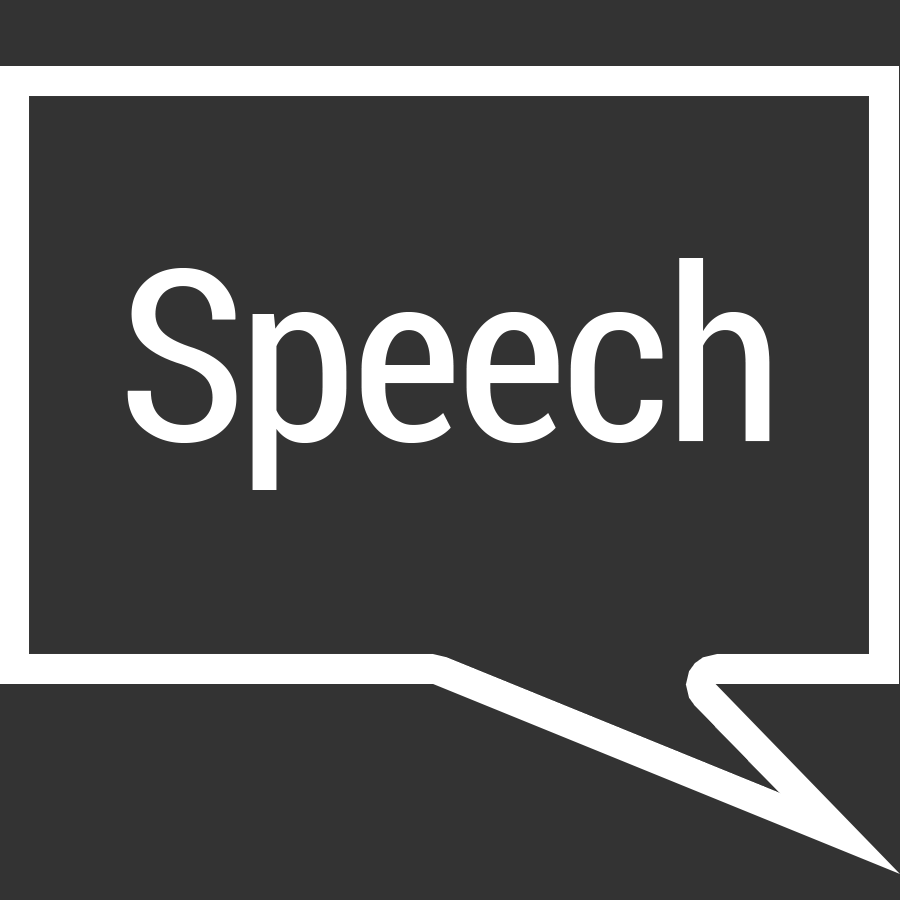
<style>
.page{position:relative;width:900px;height:900px;background:#333333}
.page>*{position:absolute;margin:0}
.t1{font:240px "RobotoCondensed-Regular";color:#ffffff}
</style>
<div class="page">
<p class="t1" style="left:127px;top:258px;width:643px;height:232px">Speech</p>
</div>
